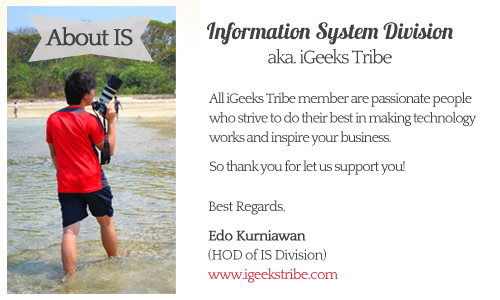
<style>
.page{position:relative;width:500px;height:300px;background:#ffffff}
.page>*{position:absolute;margin:0}
.t1{font:24.3px "Quattrocento";letter-spacing:-0.075em;color:#434242;font-weight:bold}
.t2{font:22.2px/50px "Lobster1.3";color:#434242}
.t3{font:19.4px/24.3px "Quattrocento";letter-spacing:-0.075em;color:#434242}
.t4{font:14.6px/19.4px "Quattrocento";letter-spacing:-0.075em;color:#434242}
.t5{font:14.6px/19.4px "Quattrocento";letter-spacing:-0.05em;color:#434242}
.t6{font:14.6px/19.4px "Quattrocento";letter-spacing:-0.05em;color:#434242;font-weight:bold}
.t7{font:14.6px/19.4px "Quattrocento";letter-spacing:-0.05em;color:#d5213a}
</style>
<div class="page">
<p class="t1" style="left:45px;top:27px;width:88px;height:19px">About IS</p>
<p class="t2" style="left:207px;top:22px;width:246px;height:42px;text-align:center">Information System Division<br><span class="t3">aka. iGeeks Tribe</span></p>
<p class="t4" style="left:208px;top:92px;width:269px;height:83px">All iGeeks Tribe member are passionate people <br>who strive to do their best in making technology <br>works and inspire your business. <br><br>So thank you for let us support you!</p>
<p class="t5" style="left:208px;top:200px;width:130px;height:83px">Best Regards,<br><br><span class="t6">Edo Kurniawan<br></span>(HOD of IS Division)<br><span class="t7">www.igeekstribe.com</span></p>
</div>
